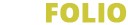
<style>
.page{position:relative;width:128px;height:25px;background:#ffffff}
.page>*{position:absolute;margin:0}
.t1{font:26.2px "OpenSans-Extrabold";text-transform:uppercase;font-weight:bold}
</style>
<div class="page">
<p class="t1" style="left:2px;top:3px;width:125px;height:20px">MYFOLIO</p>
</div>
